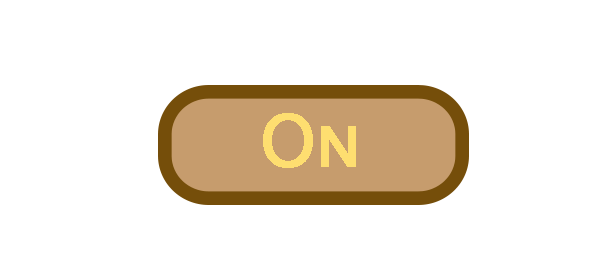
<style>
.page{position:relative;width:592px;height:276px;background:#ffffff}
.page>*{position:absolute;margin:0}
.t1{font:72px "ArialMT";letter-spacing:-0.025em;color:#fede70;font-variant:small-caps;font-weight:bold}
</style>
<div class="page">
<p class="t1" style="left:263px;top:113px;width:93px;height:55px">On</p>
</div>
